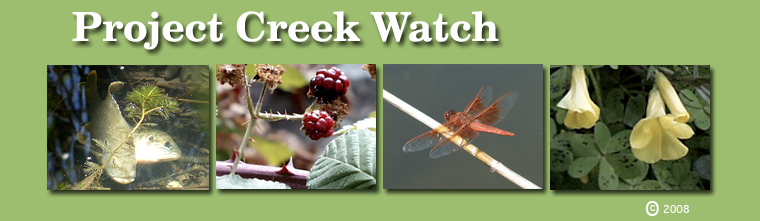
<style>
.page{position:relative;width:760px;height:221px;background:#9dbe6f}
.page>*{position:absolute;margin:0}
.t1{font:40px "NewCenturySchlbk-Bold";color:#ffffff}
.t2{font:20px "Geneva";color:#ffffff}
.t3{font:10px "Geneva";color:#ffffff}
</style>
<div class="page">
<p class="t1" style="left:72px;top:11px;width:427px;height:39px">Project Creek Watch</p>
<p class="t2" style="left:645px;top:201px;width:14px;height:15px">O</p>
<p class="t3" style="left:650px;top:205px;width:6px;height:6px">c</p>
<p class="t3" style="left:663px;top:205px;width:26px;height:8px">2008</p>
</div>
